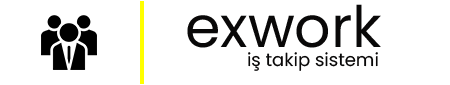
<style>
.page{position:relative;width:450px;height:85px;background:#ffffff}
.page>*{position:absolute;margin:0}
.t1{font:57px "Poppins-Regular";color:#090808}
.t2{font:18px "Poppins-Regular";color:#090808}
</style>
<div class="page">
<p class="t1" style="left:187px;top:4px;width:194px;height:44px">exwork</p>
<p class="t2" style="left:248px;top:52px;width:130px;height:19px">iş takip sistemi</p>
</div>
